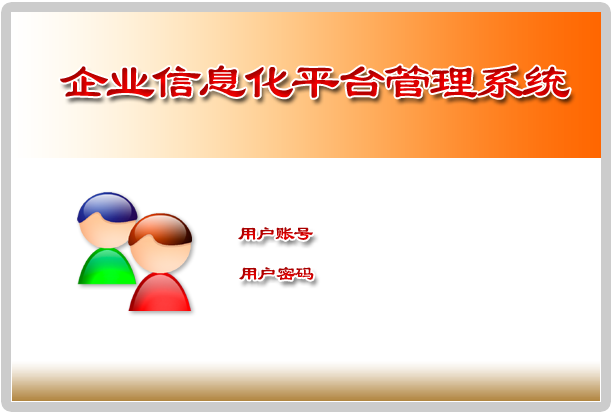
<style>
.page{position:relative;width:612px;height:413px;background:#ffffff}
.page>*{position:absolute;margin:0}
.t1{font:50px "LiSu";letter-spacing:-0.075em;text-transform:uppercase}
.t2{font:20px "LiSu";letter-spacing:-0.075em;text-transform:uppercase}
</style>
<div class="page">
<p class="t1" style="left:60px;top:65px;width:510px;height:33px">企业信息化平台管理系统</p>
<p class="t2" style="left:238px;top:227px;width:75px;height:13px">用户账号</p>
<p class="t2" style="left:239px;top:267px;width:75px;height:13px">用户密码</p>
</div>
